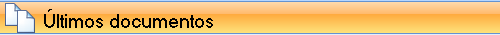
<style>
.page{position:relative;width:500px;height:35px}
.page>*{position:absolute;margin:0}
.t1{font:18px "MS Sans Serif";color:#000000}
</style>
<div class="page">
<p class="t1" style="left:44px;top:9px;width:169px;height:19px">Últimos documentos</p>
</div>
